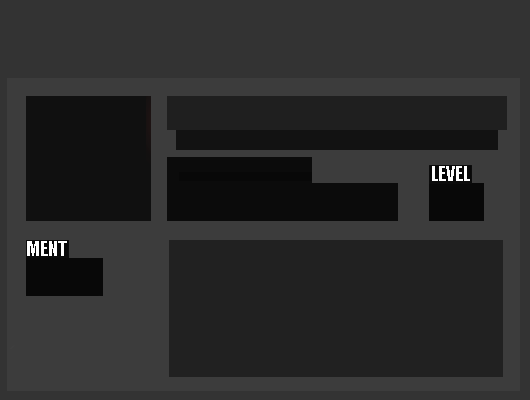
<style>
.page{position:relative;width:530px;height:400px;background:#3c3c3c}
.page>*{position:absolute;margin:0}
.t1{font:18.7px "Impact";color:#ffffff}
</style>
<div class="page">
<p class="t1" style="left:432px;top:166px;width:38px;height:15px">LEVEL</p>
<p class="t1" style="left:27px;top:241px;width:40px;height:15px">MENT</p>
</div>
